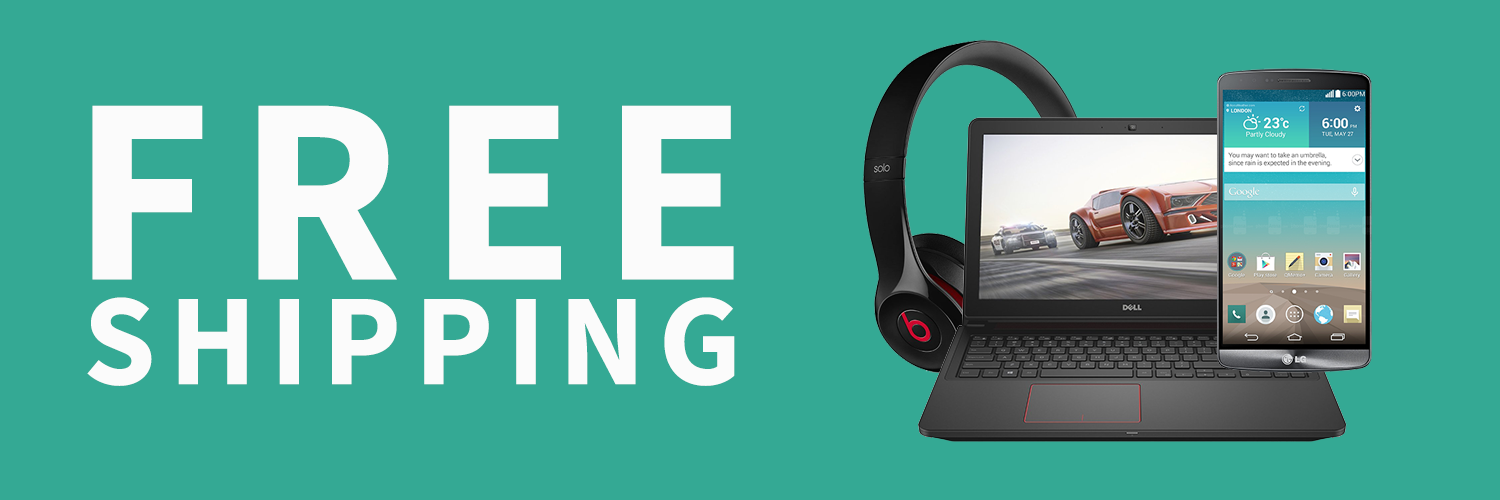
<style>
.page{position:relative;width:1500px;height:500px;background:#34a994}
.page>*{position:absolute;margin:0}
.t1{font:266.3px "SourceSansPro-Bold";letter-spacing:0.1em;color:#fbfbfb}
.t2{font:130.5px "SourceSansPro-Bold";letter-spacing:0.1em;color:#fbfbfb}
</style>
<div class="page">
<p class="t1" style="left:92px;top:105px;width:642px;height:175px">FREE</p>
<p class="t2" style="left:87px;top:297px;width:648px;height:89px">SHIPPING</p>
</div>
